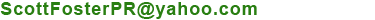
<style>
.page{position:relative;width:375px;height:20px;background:#ffffff}
.page>*{position:absolute;margin:0}
.t1{font:18px "Arial-BoldMT";letter-spacing:0.05em;color:#297f12}
</style>
<div class="page">
<p class="t1" style="left:0px;top:2px;width:257px;height:17px">ScottFosterPR@yahoo.com</p>
</div>
